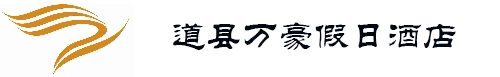
<style>
.page{position:relative;width:500px;height:77px;background:#ffffff}
.page>*{position:absolute;margin:0}
.t1{font:36px "STLiti";color:#020913}
</style>
<div class="page">
<p class="t1" style="left:173px;top:22px;width:283px;height:28px">道县万豪假日酒店</p>
</div>
